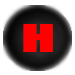
<style>
.page{position:relative;width:75px;height:75px;background:#ffffff}
.page>*{position:absolute;margin:0}
.t1{font:35.2px "Impact";color:#ff0000;scale:1.75 1}
</style>
<div class="page">
<p class="t1" style="left:23px;top:24px;width:30px;height:28px">H</p>
</div>
